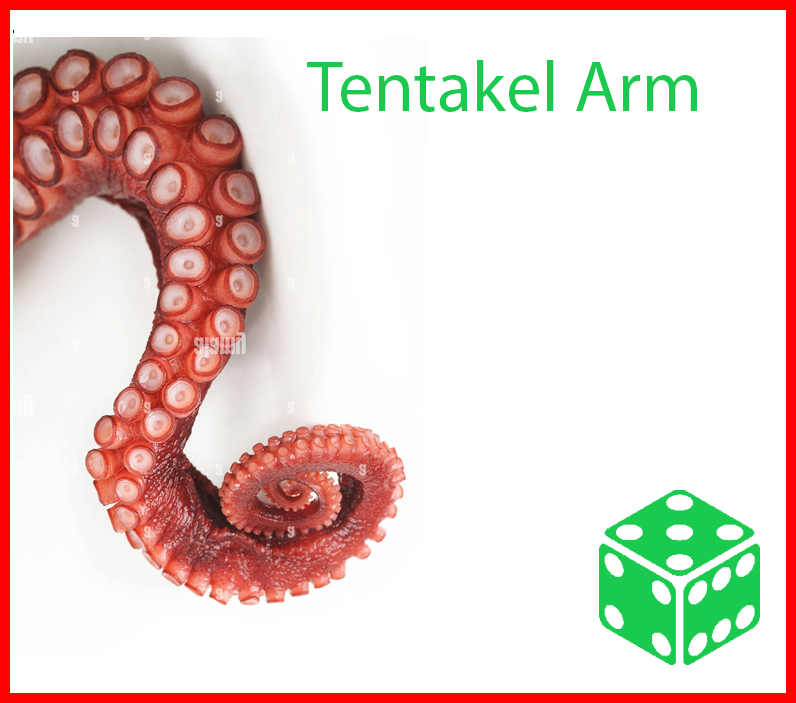
<style>
.page{position:relative;width:796px;height:703px;background:#ffffff}
.page>*{position:absolute;margin:0}
.t1{font:72px "MyriadPro-Regular";color:#19ca4f}
</style>
<div class="page">
<p class="t1" style="left:307px;top:60px;width:390px;height:52px">Tentakel Arm</p>
</div>
